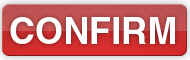
<style>
.page{position:relative;width:190px;height:60px}
.page>*{position:absolute;margin:0}
.t1{font:36px "Helvetica-Bold";color:#ffffff;text-transform:uppercase}
</style>
<div class="page">
<p class="t1" style="left:10px;top:17px;width:165px;height:27px">Confirm</p>
</div>
